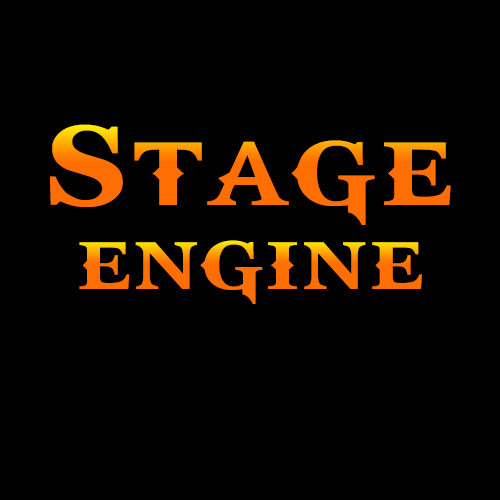
<style>
.page{position:relative;width:500px;height:500px;background:#000000}
.page>*{position:absolute;margin:0}
.t1{font:125px "GodOfWar";letter-spacing:0.05em;color:#ff6e02}
.t2{font:75px "GodOfWar";letter-spacing:0.05em}
</style>
<div class="page">
<p class="t1" style="left:50px;top:124px;width:401px;height:101px">Stage</p>
<p class="t2" style="left:79px;top:240px;width:343px;height:64px">ENGINE</p>
</div>
